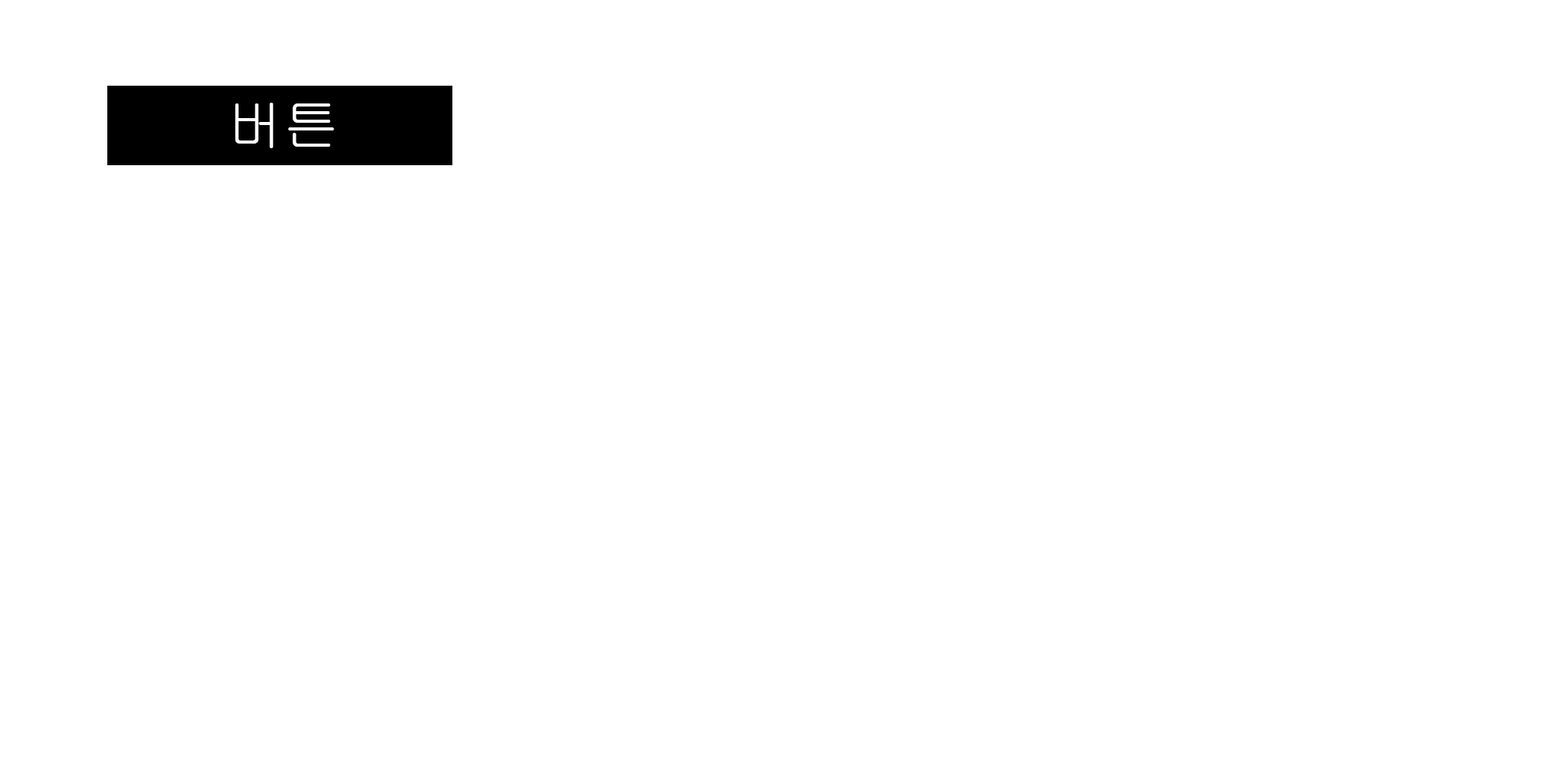
<style>
.page{position:relative;width:1544px;height:772px;background:#ffffff}
.page>*{position:absolute;margin:0}
.t1{font:55.6px "Gulim";color:#ffffff}
</style>
<div class="page">
<p class="t1" style="left:235px;top:103px;width:99px;height:45px">버튼</p>
</div>
